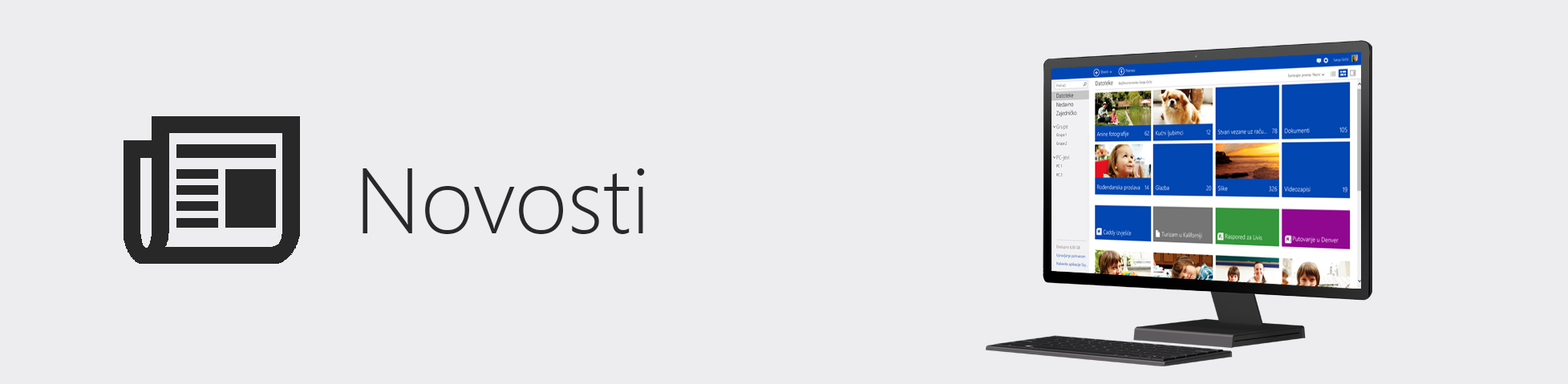
<style>
.page{position:relative;width:1568px;height:384px;background:#ededf0}
.page>*{position:absolute;margin:0}
.t1{font:93px "SegoeUI-Light";color:#282828}
</style>
<div class="page">
<p class="t1" style="left:363px;top:168px;width:282px;height:66px">Novosti</p>
</div>
